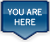
<style>
.page{position:relative;width:50px;height:42px}
.page>*{position:absolute;margin:0}
.t1{font:8px "NewsGothicMT";color:#ffffff}
</style>
<div class="page">
<p class="t1" style="left:7px;top:8px;width:35px;height:18px;text-align:center">YOU ARE<br>HERE</p>
</div>
